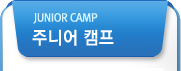
<style>
.page{position:relative;width:181px;height:71px}
.page>*{position:absolute;margin:0}
.t1{font:11px "RixGoB";letter-spacing:-0.025em;color:#d2f2ff;scale:0.95 1}
.t2{font:18px "YGO550";color:#ffffff;scale:0.95 1}
</style>
<div class="page">
<p class="t1" style="left:33px;top:13px;width:65px;height:11px">JUNIOR CAMP</p>
<p class="t2" style="left:32px;top:29px;width:82px;height:17px">주니어 캠프</p>
</div>
